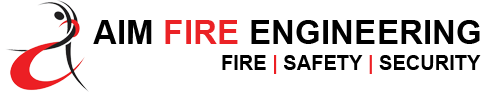
<style>
.page{position:relative;width:500px;height:92px;background:#ffffff}
.page>*{position:absolute;margin:0}
.t1{font:33.4px "Arial-BoldMT";color:#000000}
.t2{font:33.4px "Arial-BoldMT";color:#eb2226}
.t3{font:20px "Arial-BoldMT";color:#000000}
.t4{font:20px "Arial-BoldMT";color:#ec1f24}
</style>
<div class="page">
<p class="t1" style="left:93px;top:20px;width:387px;height:24px">AIM<span class="t2"> FIRE </span>ENGINEERING</p>
<p class="t3" style="left:222px;top:55px;width:259px;height:19px">FIRE <span class="t4">|</span> SAFETY <span class="t4">|</span> SECURITY</p>
</div>
